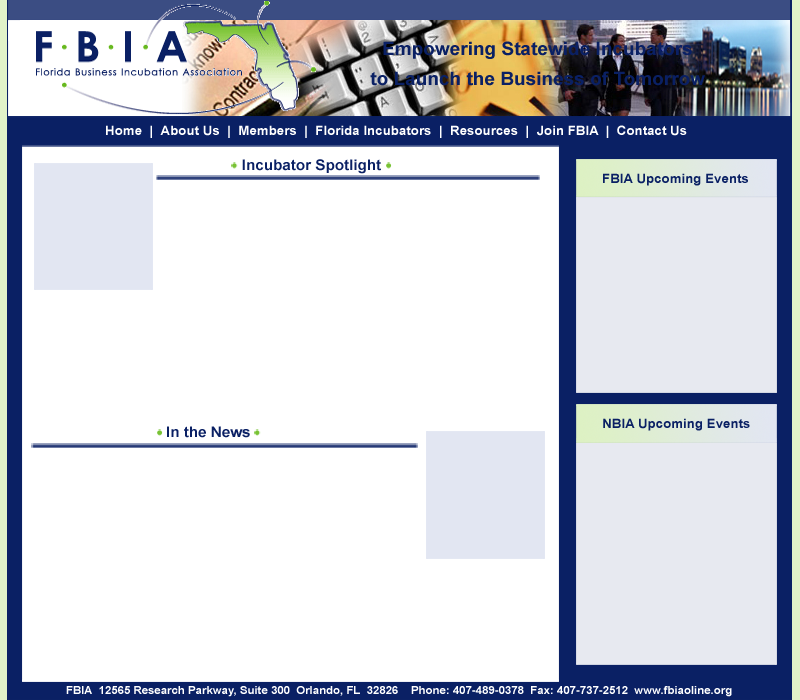
<style>
.page{position:relative;width:800px;height:700px;background:#ffffff}
.page>*{position:absolute;margin:0}
.t1{font:18.6px "Arial-BoldMT";color:#0a2064}
.t2{font:13px "Arial-BoldMT";color:#ffffff}
.t3{font:14.8px "Arial-BoldMT";color:#0a2064}
.t4{font:13px "Arial-BoldMT";color:#0a2064}
.t5{font:11.1px "Arial-BoldMT";color:#ffffff}
</style>
<div class="page">
<p class="t1" style="left:383px;top:41px;width:309px;height:18px">Empowering Statewide Incubators</p>
<p class="t1" style="left:370px;top:71px;width:335px;height:15px">to Launch the Business of Tomorrow</p>
<p class="t2" style="left:106px;top:125px;width:581px;height:13px">Home  |  About Us  |  Members  |  Florida Incubators  |  Resources  |  Join FBIA  |  Contact Us</p>
<p class="t3" style="left:242px;top:159px;width:139px;height:15px">Incubator Spotlight</p>
<p class="t4" style="left:603px;top:173px;width:145px;height:13px">FBIA Upcoming Events</p>
<p class="t4" style="left:603px;top:418px;width:147px;height:13px">NBIA Upcoming Events</p>
<p class="t3" style="left:167px;top:426px;width:83px;height:12px">In the News</p>
<p class="t5" style="left:66px;top:686px;width:666px;height:11px">FBIA  12565 Research Parkway, Suite 300  Orlando, FL  32826    Phone: 407-489-0378  Fax: 407-737-2512  www.fbiaoline.org</p>
</div>
